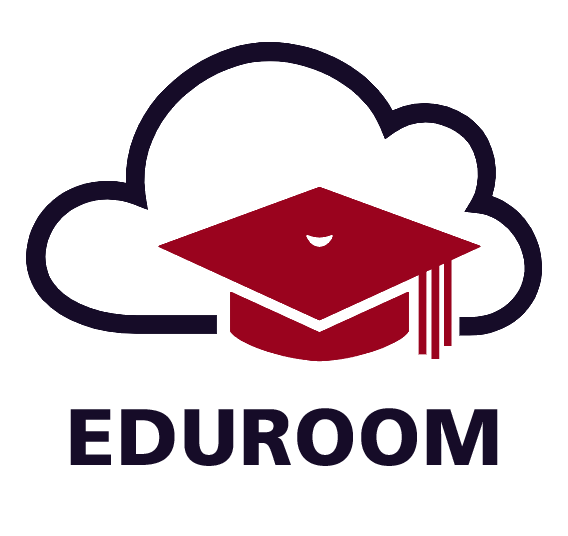
<style>
.page{position:relative;width:568px;height:536px;background:#ffffff}
.page>*{position:absolute;margin:0}
.t1{font:80px "ArticulateExtrabold";letter-spacing:0.02em;color:#160c28;text-transform:uppercase}
</style>
<div class="page">
<p class="t1" style="left:70px;top:408px;width:428px;height:58px">Eduroom</p>
</div>
